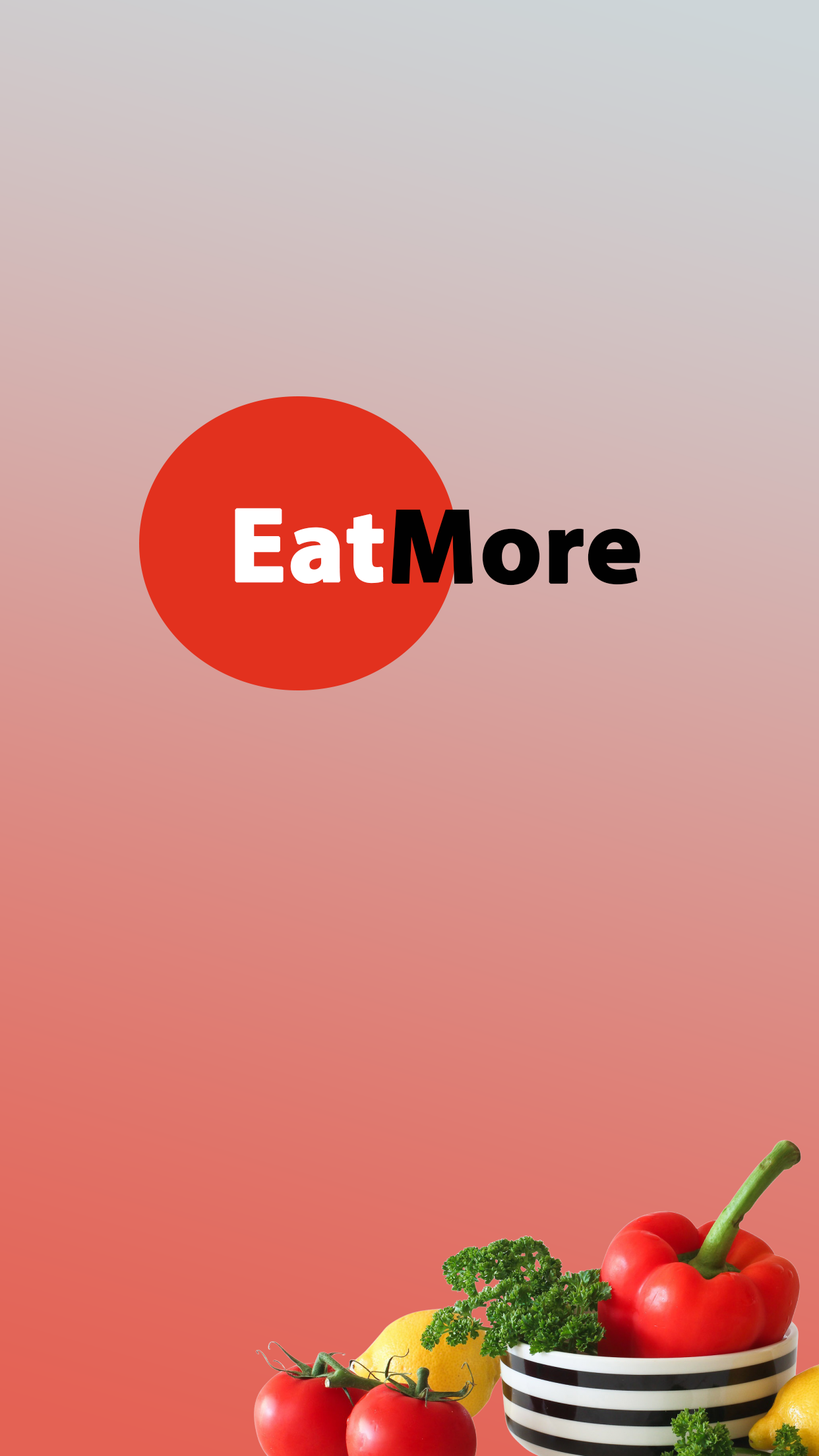
<style>
.page{position:relative;width:819px;height:1456px}
.page>*{position:absolute;margin:0}
.t1{font:105.5px "MyriadPro-Bold";color:#ffffff;font-weight:bold}
.t2{font:105.5px "MyriadPro-Bold";color:#010101;font-weight:bold}
</style>
<div class="page">
<p class="t1" style="left:235px;top:508px;width:149px;height:76px">Eat</p>
<p class="t2" style="left:391px;top:509px;width:249px;height:77px">More</p>
</div>
